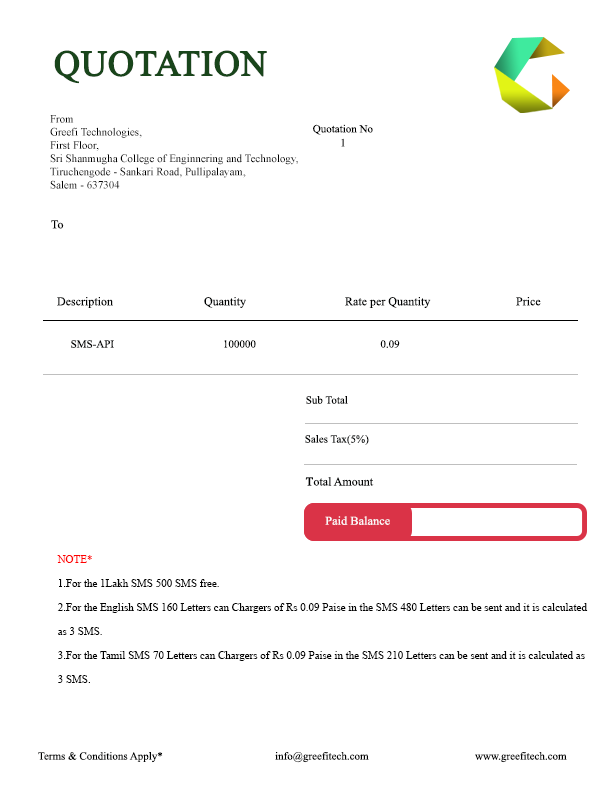
<style>
.page{position:relative;width:612px;height:792px;background:#ffffff}
.page>*{position:absolute;margin:0}
.t1{font:36px "TimesNewRomanPSMT";color:#19451b;font-weight:bold}
.t2{font:11px "TimesNewRomanPSMT";color:#000000}
.t3{font:11px/14px "TimesNewRomanPSMT";color:#000000}
.t4{font:12px "TimesNewRomanPSMT";color:#000000}
.t5{font:12px "TimesNewRomanPSMT";color:#010202}
.t6{font:11px "TimesNewRomanPSMT";color:#010202}
.t7{font:12px "TimesNewRomanPSMT";color:#010202;font-variant:small-caps;font-weight:bold}
.t8{font:12px "TimesNewRomanPSMT";color:#fbf7f8;scale:1.03 1}
.t9{font:11px/24px "TimesNewRomanPSMT";color:#010101}
.t10{font:11px/24px "TimesNewRomanPSMT";color:#ff0000}
</style>
<div class="page">
<p class="t1" style="left:54px;top:50px;width:213px;height:34px">QUOTATION</p>
<p class="t2" style="left:50px;top:115px;width:248px;height:74px">From<br>Greefi Technologies, <br>First Floor,<br>Sri Shanmugha College of Enginnering and Technology,<br>Tiruchengode - Sankari Road, Pullipalayam,<br>Salem - 637304</p>
<p class="t3" style="left:313px;top:124px;width:60px;height:23px">Quotation No<br>          1</p>
<p class="t4" style="left:51px;top:220px;width:13px;height:9px">To</p>
<p class="t5" style="left:57px;top:297px;width:484px;height:11px">Description    Quantity   Rate per Quantity                  Price</p>
<p class="t6" style="left:71px;top:340px;width:329px;height:8px">SMS-API      100000                       0.09</p>
<p class="t6" style="left:306px;top:396px;width:42px;height:8px">Sub Total</p>
<p class="t6" style="left:305px;top:435px;width:64px;height:10px">Sales Tax(5%)</p>
<p class="t5" style="left:305px;top:477px;width:69px;height:9px"><span class="t7">T</span>otal Amount</p>
<p class="t8" style="left:325px;top:516px;width:65px;height:9px">Paid Balance</p>
<p class="t9" style="left:57px;top:555px;width:531px;height:128px"><span class="t10">NOTE*<br></span>1.For the 1Lakh SMS 500 SMS free.<br>2.For the English SMS 160 Letters can Chargers of Rs 0.09 Paise in the SMS 480 Letters can be sent and it is calculated as 3 SMS.<br>3.For the Tamil SMS 70 Letters can Chargers of Rs 0.09 Paise in the SMS 210 Letters can be sent and it is calculated as 3 SMS.</p>
<p class="t6" style="left:38px;top:752px;width:125px;height:11px">Terms &amp; Conditions Apply*</p>
<p class="t2" style="left:275px;top:752px;width:94px;height:11px">info@greefitech.com</p>
<p class="t2" style="left:475px;top:752px;width:92px;height:11px">www.greefitech.com</p>
</div>
